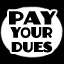
<style>
.page{position:relative;width:64px;height:64px;background:#000000}
.page>*{position:absolute;margin:0}
.t1{font:17.1px "AnchorJack";letter-spacing:0.07em;color:#000000;scale:1.17 1}
.t2{font:14px "AnchorJack";letter-spacing:-0.02em;color:#000000;scale:0.96 1}
.t3{font:14px "Arial-BoldMT";letter-spacing:-0.02em;color:#000000;scale:0.96 1}
.t4{font:13.3px "AnchorJack";letter-spacing:-0.02em;color:#000000}
</style>
<div class="page">
<p class="t1" style="left:9px;top:11px;width:47px;height:14px">PAY</p>
<p class="t2" style="left:10px;top:27px;width:43px;height:11px">Y<span class="t3">O</span>UR</p>
<p class="t4" style="left:11px;top:41px;width:42px;height:12px">DUES</p>
</div>
